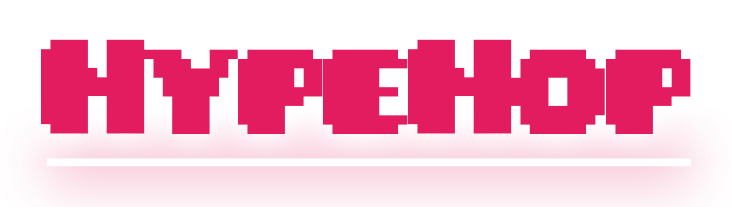
<style>
.page{position:relative;width:732px;height:207px;background:#ffffff}
.page>*{position:absolute;margin:0}
.t1{font:150px "PixelatedPusab";letter-spacing:-0.06em;color:#e31c60}
</style>
<div class="page">
<p class="t1" style="left:41px;top:39px;width:650px;height:95px">HypeHop</p>
</div>
